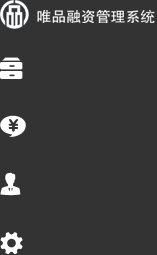
<style>
.page{position:relative;width:157px;height:255px;background:#333333}
.page>*{position:absolute;margin:0}
.t1{font:14.8px "FZHTJW--GB1-0";color:#ffffff}
</style>
<div class="page">
<p class="t1" style="left:37px;top:10px;width:118px;height:13px">唯品融资管理系统</p>
</div>
